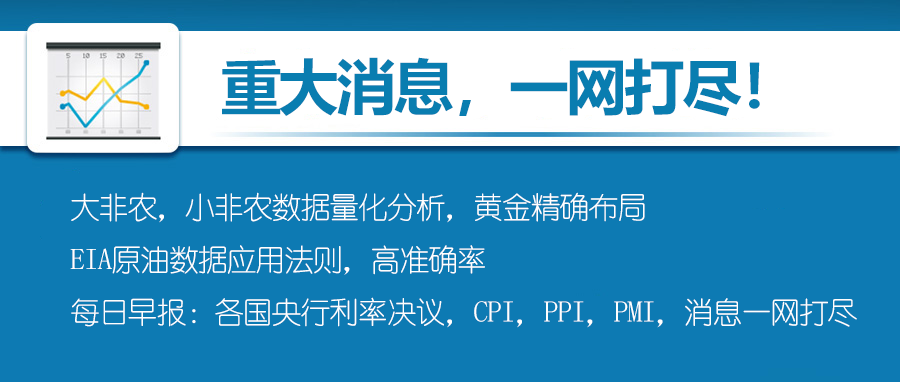
<style>
.page{position:relative;width:900px;height:382px;background:#0d7ab3}
.page>*{position:absolute;margin:0}
.t1{font:60px "MicrosoftYaHei-Bold";letter-spacing:-0.04em;color:#097db0}
.t2{font:30px "YouYuan";letter-spacing:-0.04em;color:#ffffff}
</style>
<div class="page">
<p class="t1" style="left:222px;top:57px;width:538px;height:60px">重大消息，一网打尽！</p>
<p class="t2" style="left:70px;top:192px;width:787px;height:136px">大非农，小非农数据量化分析，黄金精确布局<br>EIA原油数据应用法则，高准确率<br>每日早报：各国央行利率决议，CPI，PPI，PMI，消息一网打尽</p>
</div>
